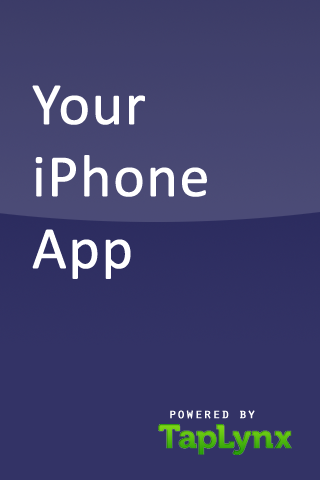
<style>
.page{position:relative;width:320px;height:480px;background:#333366}
.page>*{position:absolute;margin:0}
.t1{font:60px "Calibri";color:#ffffff;font-weight:bold}
.t2{font:14px "OratorStd";color:#ffffff;font-weight:bold}
</style>
<div class="page">
<p class="t1" style="left:32px;top:85px;width:175px;height:194px">Your <br>iPhone <br>App</p>
<p class="t2" style="left:170px;top:410px;width:85px;height:9px">powered by</p>
</div>
